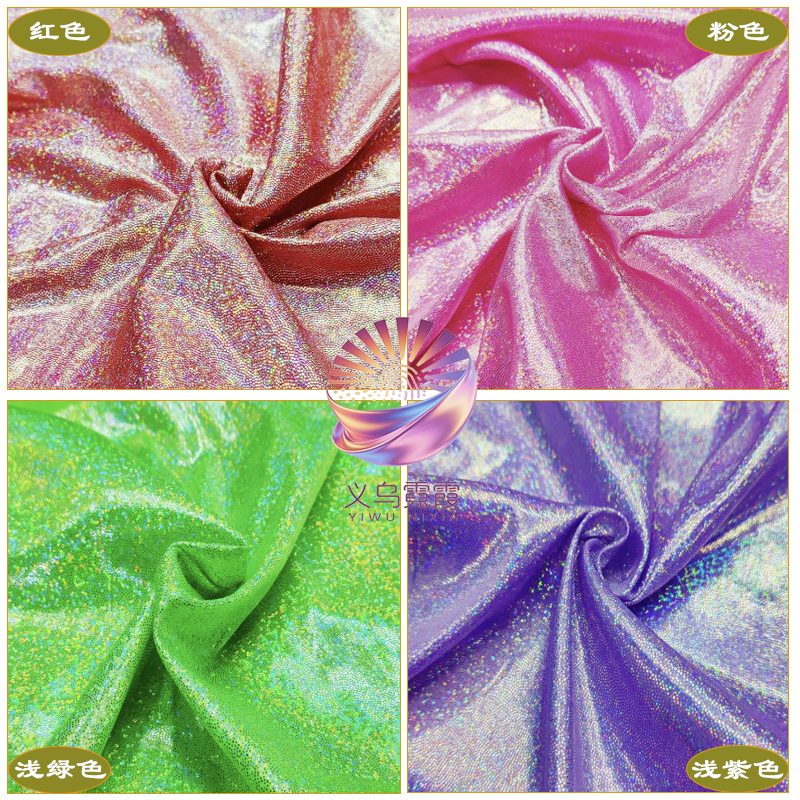
<style>
.page{position:relative;width:800px;height:800px}
.page>*{position:absolute;margin:0}
.t1{font:31px "STBaoliSC-Regular";color:#ffffff}
</style>
<div class="page">
<p class="t1" style="left:30px;top:21px;width:60px;height:20px">红色</p>
<p class="t1" style="left:707px;top:21px;width:62px;height:21px">粉色</p>
<p class="t1" style="left:15px;top:759px;width:92px;height:20px">浅绿色</p>
<p class="t1" style="left:692px;top:759px;width:92px;height:21px">浅紫色</p>
</div>
